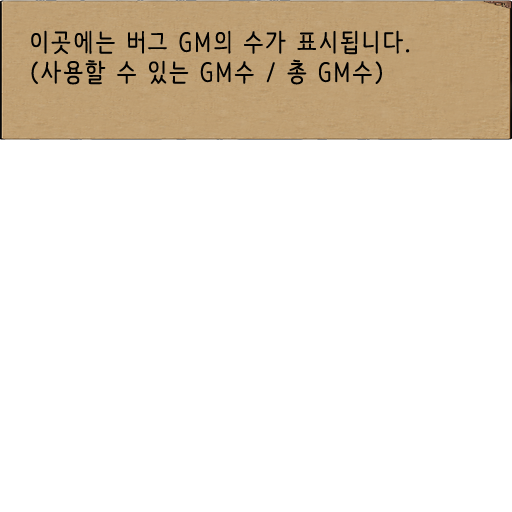
<style>
.page{position:relative;width:512px;height:512px;background:#ffffff}
.page>*{position:absolute;margin:0}
.t1{font:25px "NanumBarunpen";letter-spacing:0.075em;color:#000000;font-weight:bold}
</style>
<div class="page">
<p class="t1" style="left:31px;top:30px;width:379px;height:55px;text-align:justify">이곳에는 버그 GM의 수가 표시됩니다.<br>(사용할 수 있는 GM수 / 총 GM수)</p>
</div>
